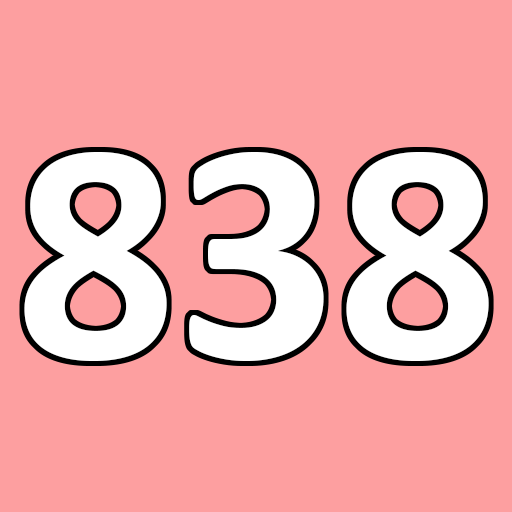
<style>
.page{position:relative;width:512px;height:512px;background:#fd9fa0}
.page>*{position:absolute;margin:0}
.t1{font:317.5px "Calibri-Bold";color:#ffffff}
</style>
<div class="page">
<p class="t1" style="left:24px;top:152px;width:465px;height:209px">838</p>
</div>
